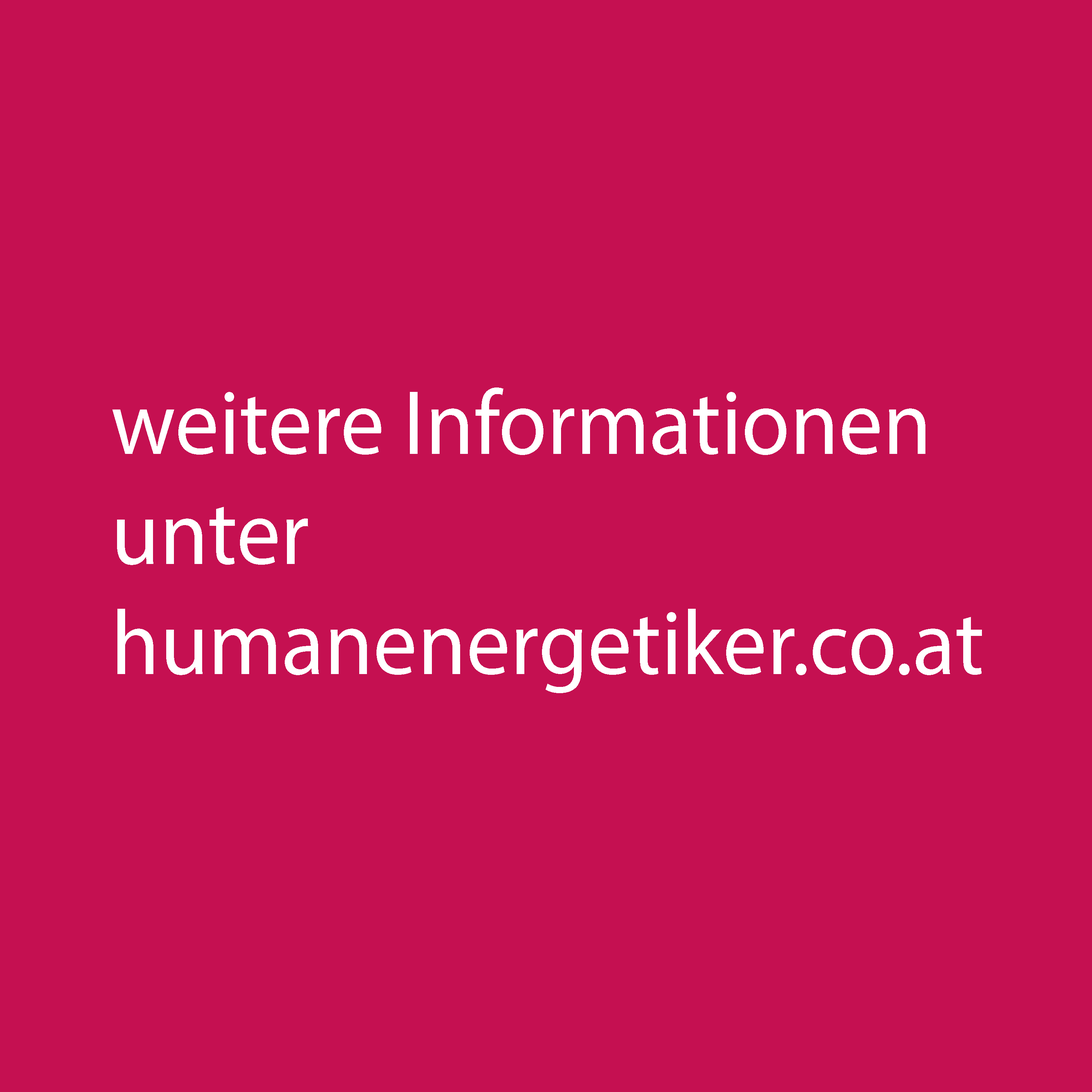
<style>
.page{position:relative;width:1092px;height:1092px;background:#c51051}
.page>*{position:absolute;margin:0}
.t1{font:91.7px "MyriadPro-Regular";color:#ffffff;scale:0.96 1}
.t2{font:84.5px "MyriadPro-Regular";color:#ffffff;scale:0.96 1}
</style>
<div class="page">
<p class="t1" style="left:112px;top:387px;width:870px;height:306px"><span class="t2"><br></span><br><br>weitere Informationen unter humanenergetiker.co.at</p>
</div>
